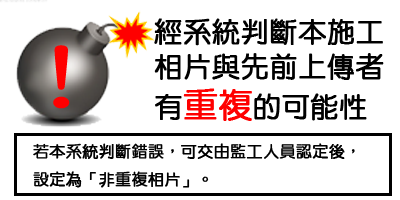
<style>
.page{position:relative;width:400px;height:200px;background:#ffffff}
.page>*{position:absolute;margin:0}
.t1{font:28px/35px "DFYuan-W5-WIN-BF";color:#000000;font-weight:bold}
.t2{font:34px/35px "DFYuan-W5-WIN-BF";color:#ff0000;font-weight:bold}
.t3{font:83.7px "DFYuan-W5-WIN-BF";color:#ff0000;font-weight:bold;scale:1.39 1}
.t4{font:16px/28px "DFYuan-W5-WIN-BF";color:#000000;font-weight:bold}
</style>
<div class="page">
<p class="t1" style="left:154px;top:18px;width:230px;height:103px">經系統判斷本施工<br>相片與先前上傳者<br>有<span class="t2">重複</span>的可能性</p>
<p class="t3" style="left:53px;top:45px;width:17px;height:64px">！</p>
<p class="t4" style="left:33px;top:143px;width:322px;height:45px">若本系統判斷錯誤，可交由監工人員認定後，<br>設定為「非重複相片」。</p>
</div>
